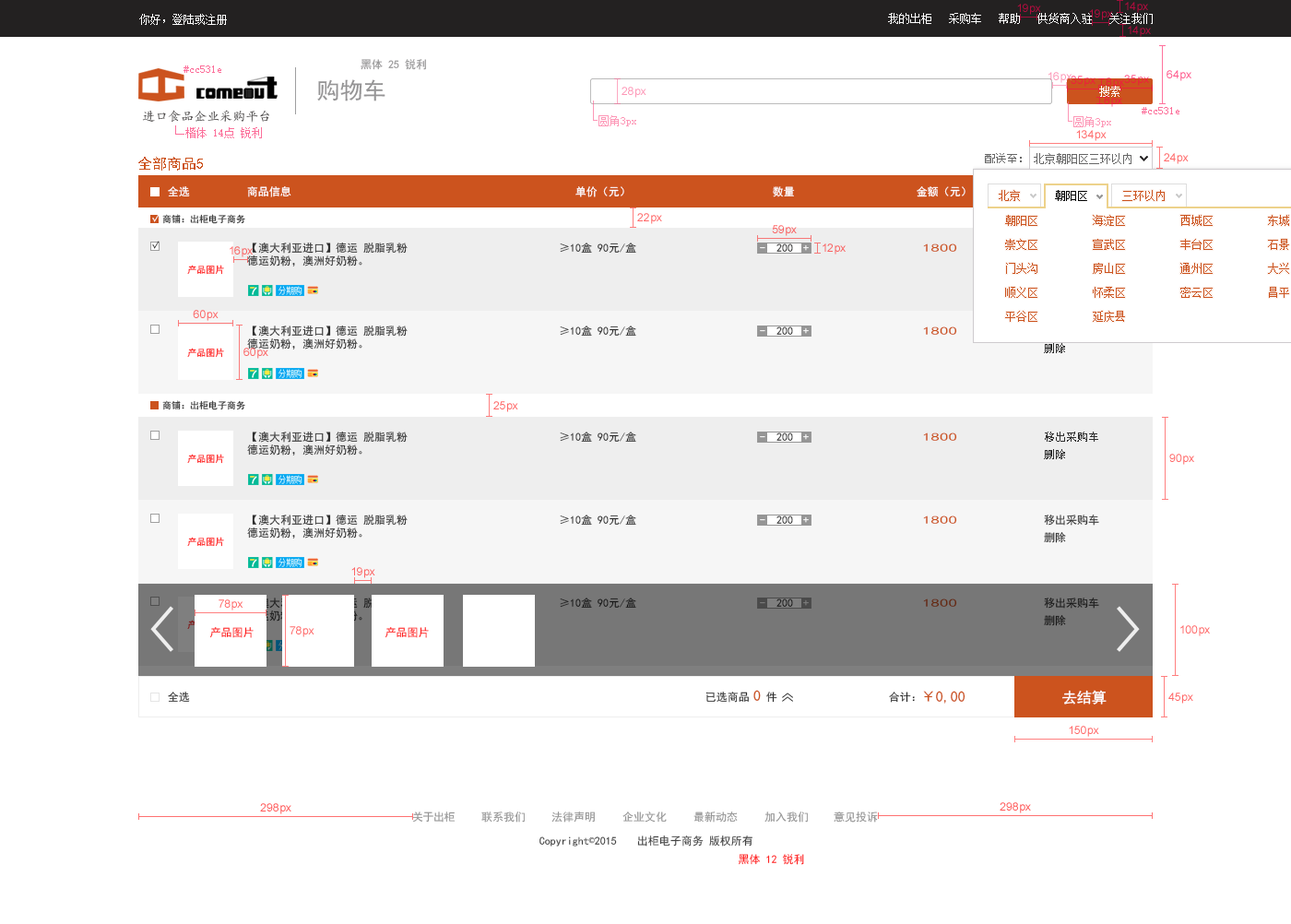
<style>
.page{position:relative;width:1291px;height:924px;background:#ffffff}
.page>*{position:absolute;margin:0}
.t1{font:11.1px "SimSun";color:#ffffff}
.t2{font:11.1px "SimSun";color:#fc6f9a}
.t3{font:11.1px "SimHei";color:#959495}
.t4{font:23px "SimHei";color:#959495}
.t5{font:12.9px "¿¬Ìå";color:#464343}
.t6{font:14.8px "SimHei";color:#cc531e}
.t7{font:11.1px "SimHei";color:#ffffff}
.t8{font:9.2px "SimHei";color:#2f2f2f}
.t9{font:11.1px "SimHei"}
.t10{font:11.1px "SimHei";color:#2e2e2e}
.t11{font:11.1px "SimHei";color:#cc531e;scale:1.59 1}
.t12{font:9.2px "SimHei"}
.t13{font:11.1px "SimHei";color:#2f2f2f}
.t14{font:11.1px "SimHei";color:#66290f;scale:1.59 1}
.t15{font:11.1px "SimHei";color:#ff1c1c}
.t16{font:14.8px "SimHei";color:#ffffff}
.t17{font:11.1px "SimHei";color:#2b2b2b}
.t18{font:11.1px "SimHei";color:#262626}
.t19{font:11.1px "SimHei";color:#959595}
.t20{font:11.1px "SimHei";color:#434343}
.t21{font:11.1px "SimSun";color:#434343}
.t22{font:11.1px "SimHei";color:#ff2222}
</style>
<div class="page">
<p class="t1" style="left:139px;top:14px;width:88px;height:11px">你好，登陆或注册</p>
<p class="t1" style="left:888px;top:13px;width:264px;height:11px">我的出柜   采购车   帮助   供货商入驻   关注我们</p>
<p class="t2" style="left:183px;top:65px;width:38px;height:8px">#cc531e</p>
<p class="t3" style="left:360px;top:59px;width:66px;height:11px">黑体 25 锐利</p>
<p class="t4" style="left:317px;top:79px;width:68px;height:22px">购物车</p>
<p class="t1" style="left:1099px;top:86px;width:21px;height:11px">搜索</p>
<p class="t5" style="left:142px;top:110px;width:127px;height:13px">进口食品企业采购平台</p>
<p class="t2" style="left:1141px;top:107px;width:38px;height:7px">#cc531e</p>
<p class="t6" style="left:138px;top:157px;width:65px;height:14px">全部商品5</p>
<p class="t7" style="left:168px;top:186px;width:22px;height:11px">全选</p>
<p class="t7" style="left:247px;top:186px;width:44px;height:11px">商品信息</p>
<p class="t7" style="left:575px;top:186px;width:49px;height:11px">单价（元）</p>
<p class="t7" style="left:773px;top:186px;width:22px;height:11px">数量</p>
<p class="t7" style="left:916px;top:186px;width:49px;height:11px">金额（元）</p>
<p class="t7" style="left:152px;top:214px;width:8px;height:8px;rotate:13deg">√</p>
<p class="t8" style="left:162px;top:214px;width:83px;height:10px">商铺：出柜电子商务</p>
<p class="t9" style="left:152px;top:241px;width:8px;height:8px;rotate:13deg">√</p>
<p class="t10" style="left:247px;top:242px;width:161px;height:24px;text-align:right">【澳大利亚进口】德运 脱脂乳粉<br>德运奶粉，澳洲好奶粉。</p>
<p class="t10" style="left:560px;top:242px;width:76px;height:12px">≥10盒 90元/盒</p>
<p class="t9" style="left:776px;top:243px;width:17px;height:9px">200</p>
<p class="t7" style="left:803px;top:244px;width:6px;height:7px">+</p>
<p class="t11" style="left:923px;top:243px;width:34px;height:9px">1800</p>
<p class="t7" style="left:760px;top:247px;width:5px;height:2px">-</p>
<p class="t12" style="left:187px;top:265px;width:37px;height:10px">产品图片</p>
<p class="t10" style="left:247px;top:325px;width:161px;height:24px;text-align:right">【澳大利亚进口】德运 脱脂乳粉<br>德运奶粉，澳洲好奶粉。</p>
<p class="t10" style="left:560px;top:325px;width:76px;height:12px">≥10盒 90元/盒</p>
<p class="t9" style="left:776px;top:326px;width:17px;height:9px">200</p>
<p class="t7" style="left:803px;top:327px;width:6px;height:7px">+</p>
<p class="t11" style="left:923px;top:326px;width:34px;height:9px">1800</p>
<p class="t7" style="left:760px;top:330px;width:5px;height:2px">-</p>
<p class="t12" style="left:187px;top:348px;width:37px;height:10px">产品图片</p>
<p class="t10" style="left:1044px;top:343px;width:21px;height:10px">删除</p>
<p class="t8" style="left:162px;top:400px;width:83px;height:10px">商铺：出柜电子商务</p>
<p class="t10" style="left:247px;top:431px;width:161px;height:24px;text-align:right">【澳大利亚进口】德运 脱脂乳粉<br>德运奶粉，澳洲好奶粉。</p>
<p class="t10" style="left:560px;top:431px;width:76px;height:12px">≥10盒 90元/盒</p>
<p class="t7" style="left:760px;top:436px;width:5px;height:2px">-</p>
<p class="t9" style="left:776px;top:432px;width:17px;height:9px">200</p>
<p class="t7" style="left:803px;top:433px;width:6px;height:7px">+</p>
<p class="t11" style="left:923px;top:432px;width:34px;height:9px">1800</p>
<p class="t10" style="left:1045px;top:431px;width:53px;height:11px">移出采购车</p>
<p class="t10" style="left:1044px;top:449px;width:21px;height:10px">删除</p>
<p class="t12" style="left:187px;top:454px;width:37px;height:10px">产品图片</p>
<p class="t10" style="left:247px;top:514px;width:161px;height:24px;text-align:right">【澳大利亚进口】德运 脱脂乳粉<br>德运奶粉，澳洲好奶粉。</p>
<p class="t10" style="left:560px;top:514px;width:76px;height:12px">≥10盒 90元/盒</p>
<p class="t7" style="left:760px;top:519px;width:5px;height:2px">-</p>
<p class="t9" style="left:776px;top:515px;width:17px;height:9px">200</p>
<p class="t7" style="left:803px;top:516px;width:6px;height:7px">+</p>
<p class="t11" style="left:923px;top:515px;width:34px;height:9px">1800</p>
<p class="t10" style="left:1044px;top:514px;width:55px;height:12px">移出采购车</p>
<p class="t10" style="left:1044px;top:532px;width:22px;height:11px">删除</p>
<p class="t12" style="left:187px;top:537px;width:37px;height:10px">产品图片</p>
<p class="t10" style="left:560px;top:597px;width:76px;height:12px">≥10盒 90元/盒</p>
<p class="t9" style="left:760px;top:602px;width:5px;height:2px">-</p>
<p class="t13" style="left:776px;top:598px;width:17px;height:9px">200</p>
<p class="t9" style="left:803px;top:599px;width:6px;height:7px">+</p>
<p class="t14" style="left:923px;top:598px;width:34px;height:9px">1800</p>
<p class="t10" style="left:1044px;top:597px;width:55px;height:12px">移出采购车</p>
<p class="t10" style="left:1044px;top:615px;width:22px;height:11px">删除</p>
<p class="t15" style="left:209px;top:627px;width:45px;height:11px">产品图片</p>
<p class="t15" style="left:384px;top:627px;width:45px;height:11px">产品图片</p>
<p class="t6" style="left:753px;top:690px;width:8px;height:11px">0</p>
<p class="t16" style="left:1062px;top:690px;width:44px;height:14px">去结算</p>
<p class="t9" style="left:168px;top:691px;width:22px;height:12px">全选</p>
<p class="t17" style="left:705px;top:691px;width:72px;height:12px">已选商品   件</p>
<p class="t18" style="left:889px;top:691px;width:26px;height:12px">合计：</p>
<p class="t6" style="left:923px;top:691px;width:42px;height:12px">￥0,00</p>
<p class="t19" style="left:412px;top:811px;width:43px;height:11px">关于出柜</p>
<p class="t19" style="left:481px;top:811px;width:44px;height:11px">联系我们</p>
<p class="t19" style="left:551px;top:811px;width:44px;height:11px">法律声明</p>
<p class="t19" style="left:622px;top:811px;width:45px;height:11px">企业文化</p>
<p class="t19" style="left:693px;top:811px;width:45px;height:11px">最新动态</p>
<p class="t19" style="left:764px;top:811px;width:44px;height:11px">加入我们</p>
<p class="t19" style="left:833px;top:811px;width:45px;height:11px">意见投诉</p>
<p class="t20" style="left:539px;top:836px;width:78px;height:10px">Copyright<span class="t21">©</span>2015</p>
<p class="t20" style="left:637px;top:835px;width:66px;height:11px">出柜电子商务</p>
<p class="t20" style="left:709px;top:835px;width:43px;height:11px">版权所有</p>
<p class="t22" style="left:738px;top:854px;width:66px;height:11px">黑体 12 锐利</p>
</div>
